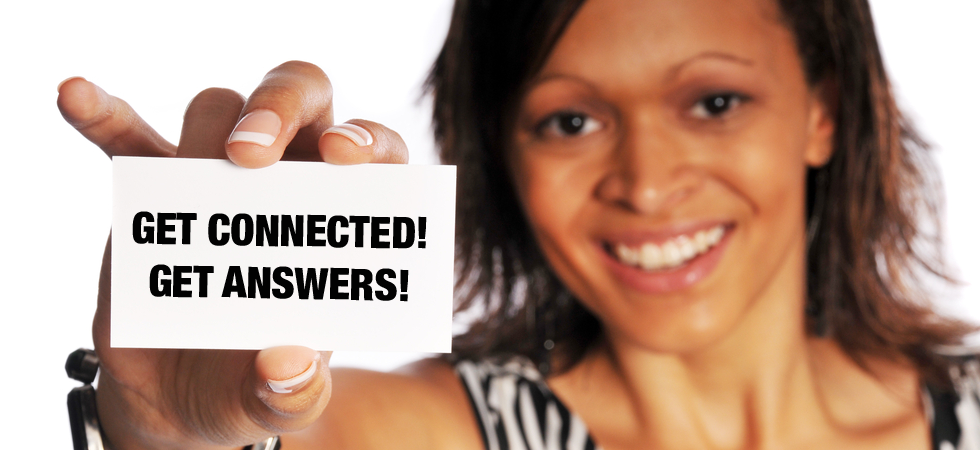
<style>
.page{position:relative;width:980px;height:450px}
.page>*{position:absolute;margin:0}
.t1{font:43.7px "HelveticaNeueLTStd-BlkCn";letter-spacing:-0.01em;color:#020202;text-transform:uppercase}
</style>
<div class="page">
<p class="t1" style="left:132px;top:211px;width:295px;height:91px;text-align:center;rotate:1deg">GET CONNECTED!<br>GET ANSWERS!</p>
</div>
